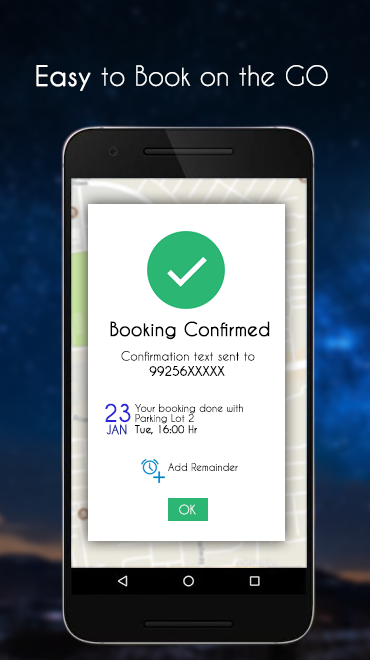
<style>
.page{position:relative;width:370px;height:660px;background:#ffffff}
.page>*{position:absolute;margin:0}
.t1{font:26px "CaviarDreams";color:#ffffff}
.t2{font:26px "CaviarDreams";color:#ffffff;font-weight:bold}
.t3{font:18px "CaviarDreams";color:#000000;font-weight:bold}
.t4{font:12px "CaviarDreams";color:#000000}
.t5{font:12px "CaviarDreams";color:#000000;font-weight:bold}
.t6{font:22px "CaviarDreams";color:#2c28d9;font-weight:bold}
.t7{font:10px/10px "CaviarDreams";color:#000000}
.t8{font:12px "CaviarDreams";color:#222e9f;font-weight:bold}
.t9{font:10px "CaviarDreams";color:#000000;font-weight:bold}
.t10{font:10px "CaviarDreams";color:#000000}
.t11{font:12px "CaviarDreams";color:#ffffff}
</style>
<div class="page">
<p class="t1" style="left:36px;top:65px;width:292px;height:26px"><span class="t2">Easy</span> to Book on the GO</p>
<p class="t3" style="left:110px;top:321px;width:160px;height:19px">Booking Confirmed</p>
<p class="t4" style="left:121px;top:351px;width:134px;height:10px">Confirmation text sent to</p>
<p class="t5" style="left:149px;top:365px;width:76px;height:11px">99256XXXXX</p>
<p class="t6" style="left:105px;top:403px;width:26px;height:20px">23</p>
<p class="t7" style="left:135px;top:404px;width:108px;height:20px">Your booking done with<br>Parking Lot 2</p>
<p class="t8" style="left:106px;top:424px;width:21px;height:11px">JAN</p>
<p class="t9" style="left:135px;top:425px;width:62px;height:10px">Tue, 16:00 Hr</p>
<p class="t10" style="left:168px;top:462px;width:70px;height:9px">Add Remainder</p>
<p class="t11" style="left:179px;top:504px;width:17px;height:11px">OK</p>
</div>
